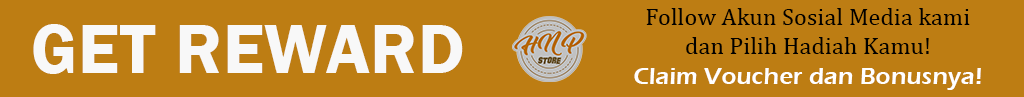
<style>
.page{position:relative;width:1024px;height:97px;background:#bd7d13}
.page>*{position:absolute;margin:0}
.t1{font:24px "CambriaMath";letter-spacing:0.01em;color:#000000}
.t2{font:72px "FranklinGothic-Demi";letter-spacing:0.01em;color:#f8f8f8}
.t3{font:24px "ErasITC-Demi";letter-spacing:0.01em;color:#ffffff}
</style>
<div class="page">
<p class="t1" style="left:646px;top:8px;width:324px;height:46px;text-align:center">Follow Akun Sosial Media kami<br>dan Pilih Hadiah Kamu!</p>
<p class="t2" style="left:33px;top:24px;width:430px;height:50px">GET REWARD</p>
<p class="t3" style="left:634px;top:68px;width:347px;height:22px">Claim Voucher dan Bonusnya!</p>
</div>
